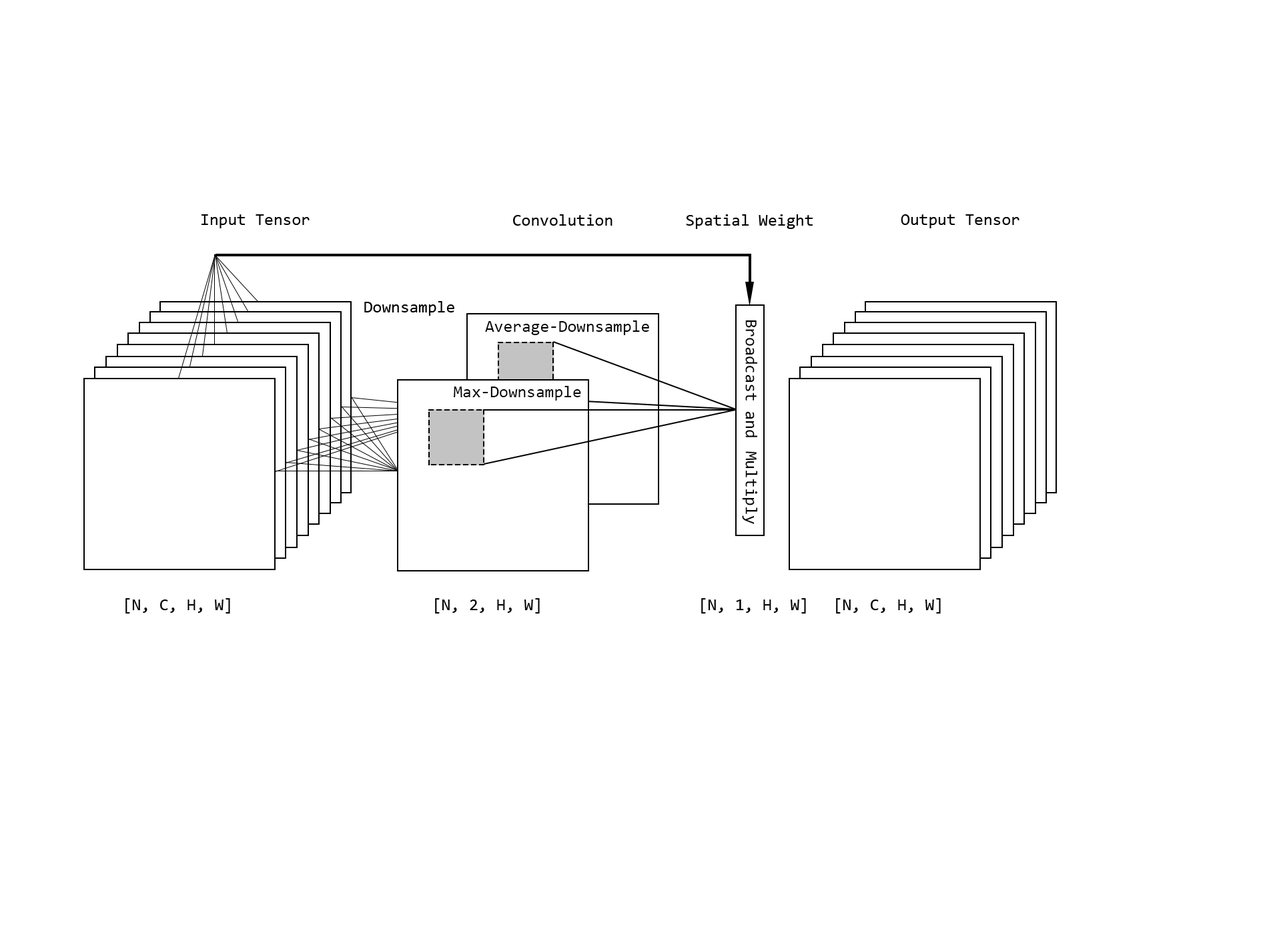
<style>
.page{position:relative;width:1261px;height:946px;background:#ffffff}
.page>*{position:absolute;margin:0}
.t1{font:16.7px "Consolas";color:#000000}
</style>
<div class="page">
<p class="t1" style="left:202px;top:214px;width:108px;height:14px">Input Tensor</p>
<p class="t1" style="left:513px;top:214px;width:100px;height:12px">Convolution</p>
<p class="t1" style="left:686px;top:214px;width:127px;height:15px">Spatial Weight</p>
<p class="t1" style="left:901px;top:214px;width:119px;height:14px">Output Tensor</p>
<p class="t1" style="left:364px;top:301px;width:90px;height:15px">Downsample</p>
<p class="t1" style="left:485px;top:320px;width:164px;height:15px">Average-Downsample</p>
<p class="t1" style="left:742px;top:320px;width:16px;height:204px;text-align:center">Broadcast and  Multiply</p>
<p class="t1" style="left:454px;top:386px;width:127px;height:14px">Max-Downsample</p>
<p class="t1" style="left:125px;top:598px;width:105px;height:15px">[N, C, H, W]</p>
<p class="t1" style="left:435px;top:598px;width:105px;height:15px">[N, 2, H, W]</p>
<p class="t1" style="left:701px;top:598px;width:105px;height:15px">[N, 1, H, W]</p>
<p class="t1" style="left:836px;top:598px;width:105px;height:15px">[N, C, H, W]</p>
</div>
